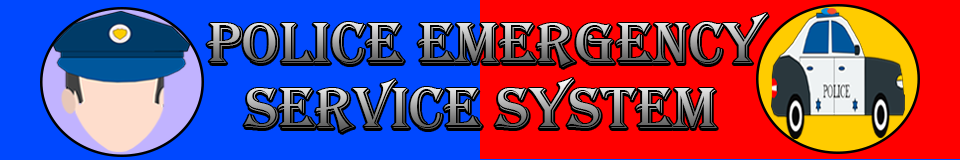
<style>
.page{position:relative;width:960px;height:160px;background:#0048ff}
.page>*{position:absolute;margin:0}
.t1{font:60px "Algerian"}
</style>
<div class="page">
<p class="t1" style="left:207px;top:12px;width:561px;height:55px">POLICE EMERGENCY</p>
<p class="t1" style="left:244px;top:77px;width:473px;height:55px">SERVICE SYSTEM</p>
</div>
